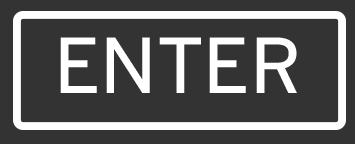
<style>
.page{position:relative;width:355px;height:144px;background:#333333}
.page>*{position:absolute;margin:0}
.t1{font:75px "BentonGothicTab-Medium";color:#ffffff}
</style>
<div class="page">
<p class="t1" style="left:60px;top:37px;width:237px;height:56px">ENTER</p>
</div>
